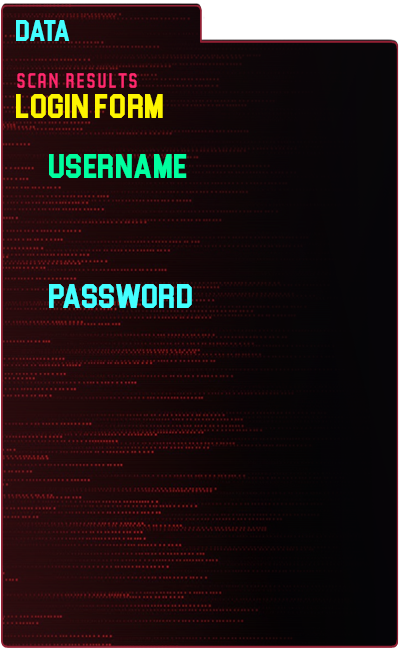
<style>
.page{position:relative;width:400px;height:650px}
.page>*{position:absolute;margin:0}
.t1{font:30px "Blockletter";color:#43ffff}
.t2{font:35px "Party-Lights-[WLM]-Flat";color:#ff296d}
.t3{font:35px "Blockletter";color:#fdf500}
.t4{font:35px "Blockletter";color:#00ff9f}
.t5{font:35px "Blockletter";color:#43ffff}
</style>
<div class="page">
<p class="t1" style="left:16px;top:20px;width:54px;height:21px">DATA</p>
<p class="t2" style="left:17px;top:73px;width:120px;height:15px">Scan REsults</p>
<p class="t3" style="left:16px;top:94px;width:147px;height:24px">login form</p>
<p class="t4" style="left:49px;top:154px;width:138px;height:24px">username</p>
<p class="t5" style="left:49px;top:284px;width:143px;height:24px">password</p>
</div>
